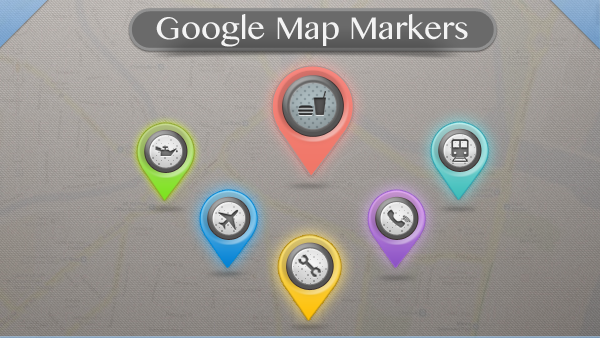
<style>
.page{position:relative;width:600px;height:338px}
.page>*{position:absolute;margin:0}
.t1{font:45px "SinhalaMN";color:#f3f3f3}
</style>
<div class="page">
<p class="t1" style="left:156px;top:14px;width:312px;height:33px">Google Map Markers</p>
</div>
